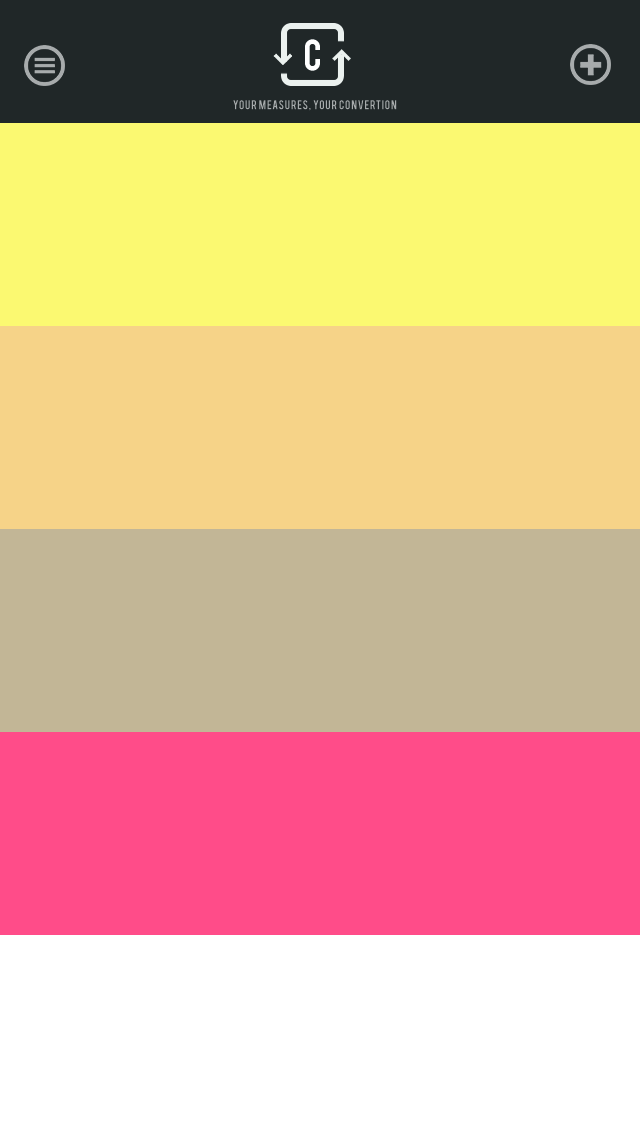
<style>
.page{position:relative;width:640px;height:1136px}
.page>*{position:absolute;margin:0}
.t1{font:35px "Bebas";letter-spacing:0.06em;color:#ffffff}
.t2{font:10px "Bebas";letter-spacing:0.06em;color:#a7abac}
</style>
<div class="page">
<p class="t1" style="left:305px;top:39px;width:15px;height:32px">C</p>
<p class="t2" style="left:233px;top:100px;width:164px;height:11px">your measures, your convertion</p>
</div>
